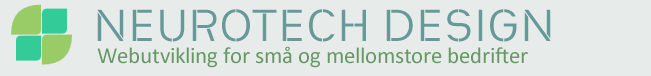
<style>
.page{position:relative;width:651px;height:76px;background:#e7ecea}
.page>*{position:absolute;margin:0}
.t1{font:48px "HeimatStencil-Regular";color:#669999}
.t2{font:23px "Calibri";color:#669966}
</style>
<div class="page">
<p class="t1" style="left:97px;top:9px;width:454px;height:33px">NEUROTECH DESIGN</p>
<p class="t2" style="left:97px;top:46px;width:431px;height:22px">Webutvikling for små og mellomstore bedrifter</p>
</div>
